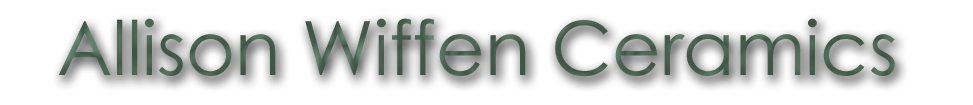
<style>
.page{position:relative;width:973px;height:105px;background:#ffffff}
.page>*{position:absolute;margin:0}
.t1{font:75px "CenturyGothic";color:#486050}
</style>
<div class="page">
<p class="t1" style="left:58px;top:18px;width:837px;height:59px">Allison Wiffen Ceramics</p>
</div>
